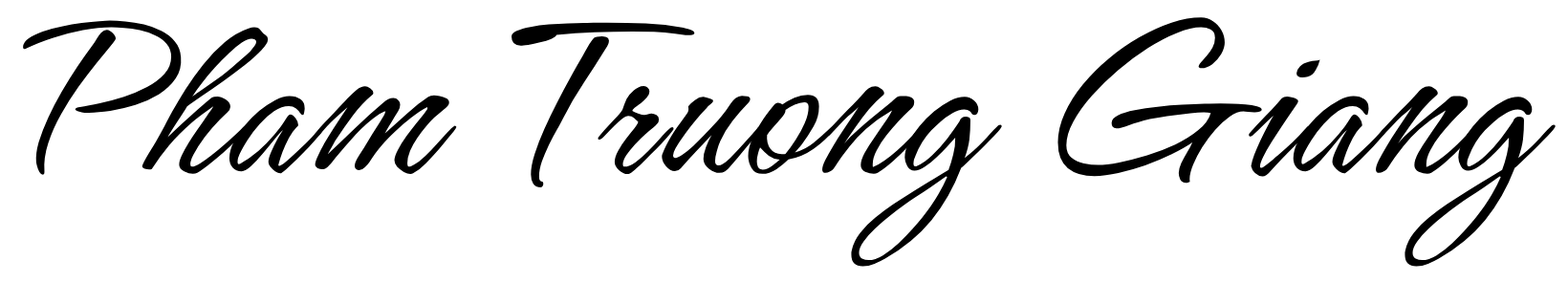
<style>
.page{position:relative;width:1568px;height:282px;background:#ffffff}
.page>*{position:absolute;margin:0}
.t1{font:248.6px "Hurricane-Regular";color:#000000}
</style>
<div class="page">
<p class="t1" style="left:23px;top:17px;width:1533px;height:250px">Pham Truong Giang</p>
</div>
